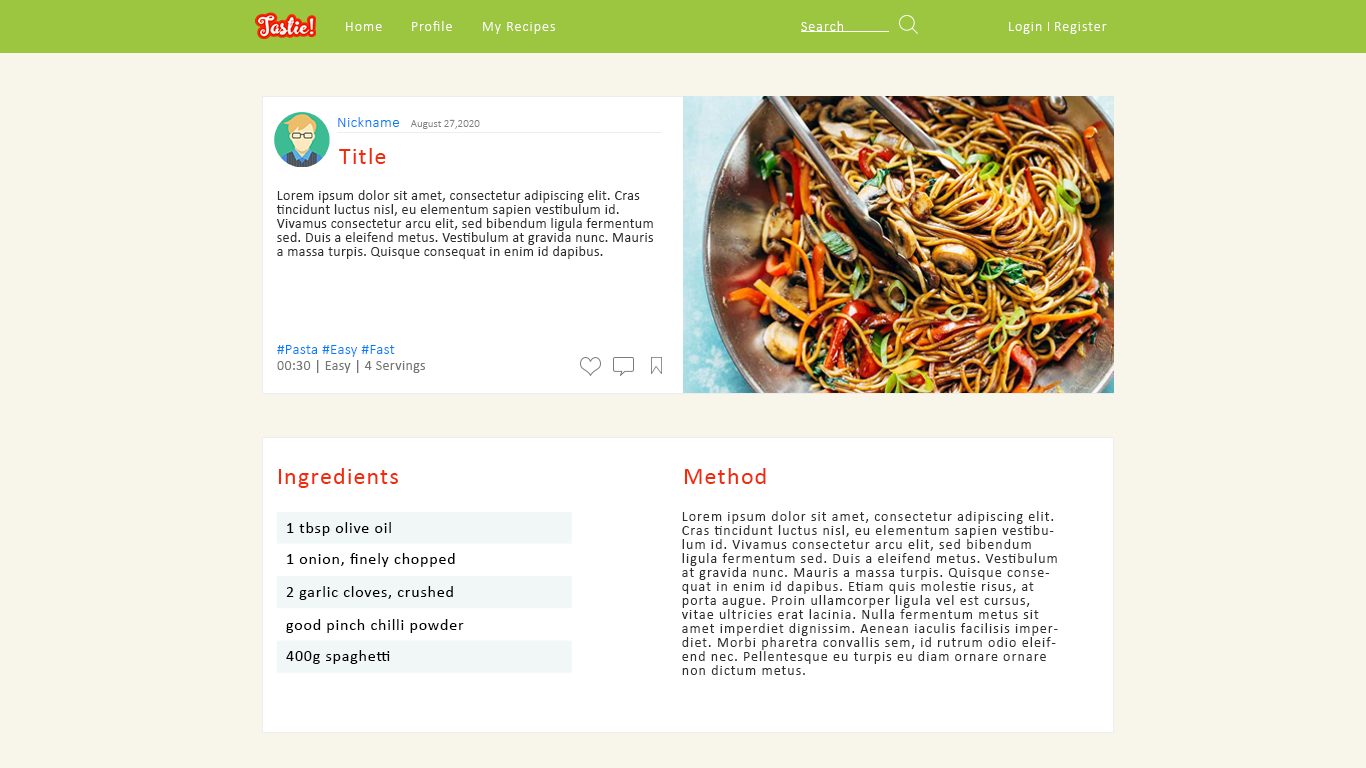
<style>
.page{position:relative;width:1366px;height:768px;background:#f8f5eb}
.page>*{position:absolute;margin:0}
.t1{font:14px "Calibri-Light";letter-spacing:0.075em;color:#ffffff}
.t2{font:15px "Calibri-Light";letter-spacing:0.025em;color:#007eff}
.t3{font:11px "Calibri-Light";color:#7f7f7f}
.t4{font:24px "Calibri";letter-spacing:0.05em;color:#f02c0b}
.t5{font:14px/14px "Calibri";letter-spacing:0.025em;color:#2f2f2f}
.t6{font:14px "Calibri";letter-spacing:0.025em;color:#737572}
.t7{font:14px/14px "Calibri";letter-spacing:0.075em;color:#2f2f2f}
.t8{font:16px "Calibri";letter-spacing:0.05em;color:#000000}
</style>
<div class="page">
<p class="t1" style="left:346px;top:22px;width:36px;height:9px">Home</p>
<p class="t1" style="left:412px;top:21px;width:40px;height:10px">Profile</p>
<p class="t1" style="left:483px;top:22px;width:72px;height:12px">My Recipes</p>
<p class="t1" style="left:801px;top:21px;width:42px;height:10px">Search</p>
<p class="t1" style="left:1009px;top:22px;width:33px;height:12px">Login</p>
<p class="t1" style="left:1055px;top:22px;width:52px;height:12px">Register</p>
<p class="t2" style="left:338px;top:117px;width:61px;height:10px">Nickname</p>
<p class="t3" style="left:410px;top:119px;width:70px;height:10px">August 27,2020</p>
<p class="t4" style="left:339px;top:148px;width:47px;height:16px">Title</p>
<p class="t5" style="left:276px;top:190px;width:377px;height:69px">Lorem ipsum dolor sit amet, consectetur adipiscing elit. Cras tincidunt luctus nisl, eu elementum sapien vestibulum id. Vivamus consectetur arcu elit, sed bibendum ligula fermentum sed. Duis a eleifend metus. Vestibulum at gravida nunc. Mauris a massa turpis. Quisque consequat in enim id dapibus.</p>
<p class="t2" style="left:277px;top:345px;width:118px;height:12px">#Pasta #Easy #Fast</p>
<p class="t6" style="left:277px;top:360px;width:148px;height:13px">00:30 | Easy | 4 Servings</p>
<p class="t4" style="left:278px;top:468px;width:120px;height:20px">Ingredients</p>
<p class="t4" style="left:684px;top:468px;width:82px;height:16px">Method</p>
<p class="t7" style="left:681px;top:511px;width:377px;height:164px">Lorem ipsum dolor sit amet, consectetur adipiscing elit. Cras tincidunt luctus nisl, eu elementum sapien vestibulum id. Vivamus consectetur arcu elit, sed bibendum ligula fermentum sed. Duis a eleifend metus. Vestibulum at gravida nunc. Mauris a massa turpis. Quisque consequat in enim id dapibus. Etiam quis molestie risus, at porta augue. Proin ullamcorper ligula vel est cursus, vitae ultricies erat lacinia. Nulla fermentum metus sit amet imperdiet dignissim. Aenean iaculis facilisis imperdiet. Morbi pharetra convallis sem, id rutrum odio eleifend nec. Pellentesque eu turpis eu diam ornare ornare non dictum metus.</p>
<p class="t8" style="left:287px;top:522px;width:104px;height:14px">1 tbsp olive oil</p>
<p class="t8" style="left:287px;top:553px;width:168px;height:14px">1 onion, finely chopped</p>
<p class="t8" style="left:286px;top:586px;width:167px;height:14px">2 garlic cloves, crushed</p>
<p class="t8" style="left:286px;top:619px;width:178px;height:14px">good pinch chilli powder</p>
<p class="t8" style="left:286px;top:650px;width:104px;height:14px">400g spaghetti</p>
</div>
